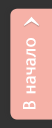
<style>
.page{position:relative;width:52px;height:128px;background:#f6b1a7}
.page>*{position:absolute;margin:0}
.t1{font:18.3px "BlissPro-Light";color:#ffffff;font-weight:bold}
</style>
<div class="page">
<p class="t1" style="left:23px;top:38px;width:13px;height:71px;rotate:-90deg">В начало</p>
</div>
